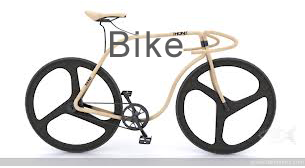
<style>
.page{position:relative;width:305px;height:168px;background:#ffffff}
.page>*{position:absolute;margin:0}
.t1{font:36px "ArialMT";letter-spacing:0.06em;color:#5c5c5c}
</style>
<div class="page">
<p class="t1" style="left:110px;top:31px;width:73px;height:27px">Bike</p>
</div>
